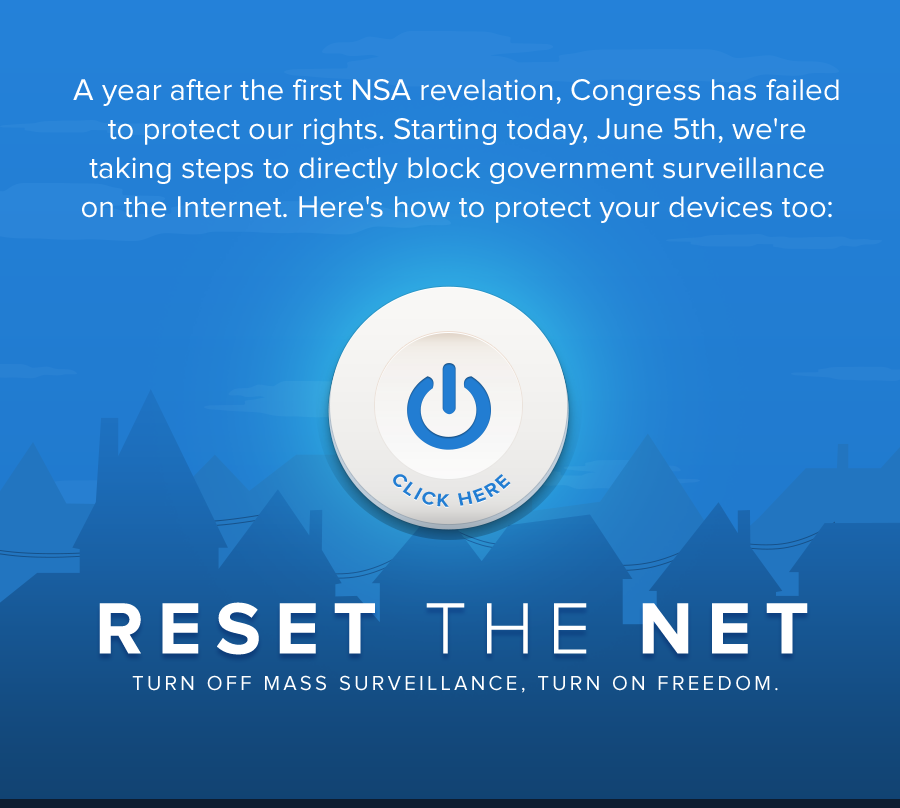
<style>
.page{position:relative;width:900px;height:808px}
.page>*{position:absolute;margin:0}
.t1{font:31.1px/39.2px "ProximaNova-Regular";color:#ffffff}
.t2{font:18.7px "ProximaNova-Bold";letter-spacing:0.14em;color:#227dd2;text-transform:uppercase;scale:1.07 1}
.t3{font:74.9px "ProximaNova-Bold";letter-spacing:0.185em;color:#ffffff}
.t4{font:74.9px "ProximaNova-Light";letter-spacing:0.185em;color:#ffffff}
.t5{font:20.8px "ProximaNova-Regular";letter-spacing:0.16em;color:#ffffff;text-transform:uppercase}
</style>
<div class="page">
<p class="t1" style="left:73px;top:79px;width:766px;height:144px;text-align:center">A year after the first NSA revelation, Congress has failed to protect our rights. Starting today, June 5th, we're taking steps to directly block government surveillance on the Internet. Here's how to protect your devices too:</p>
<p class="t2" style="left:393px;top:474px;width:118px;height:33px;rotate:-2deg">CLICK HERE</p>
<p class="t3" style="left:99px;top:602px;width:709px;height:53px">RESET <span class="t4">THE </span>NET</p>
<p class="t5" style="left:132px;top:675px;width:646px;height:18px">turn off mass surveillance, turn on freedom.</p>
</div>
